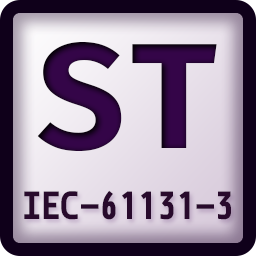
<style>
.page{position:relative;width:256px;height:256px}
.page>*{position:absolute;margin:0}
.t1{font:150px "FiraCode-Bold";letter-spacing:0.02em;color:#340548}
.t2{font:30px "MonoidNerdFontCompleteM-Bold";letter-spacing:-0.025em;color:#280a2c}
</style>
<div class="page">
<p class="t1" style="left:37px;top:42px;width:180px;height:109px">ST</p>
<p class="t2" style="left:24px;top:190px;width:207px;height:30px">IEC-61131-3</p>
</div>
